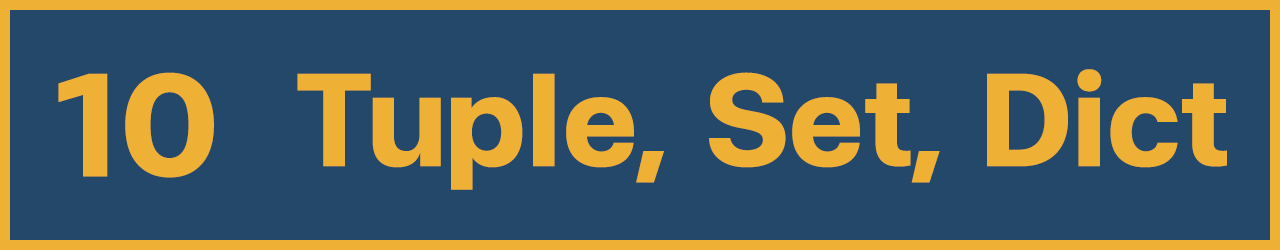
<style>
.page{position:relative;width:1280px;height:250px;background:#23486a}
.page>*{position:absolute;margin:0}
.t1{font:200px "FCMinimalBold";color:#efb036}
.t2{font:180px "FCMinimalBold";color:#efb036}
</style>
<div class="page">
<p class="t1" style="left:58px;top:72px;width:156px;height:106px">10</p>
<p class="t2" style="left:297px;top:69px;width:930px;height:121px">Tuple, Set, Dict</p>
</div>
